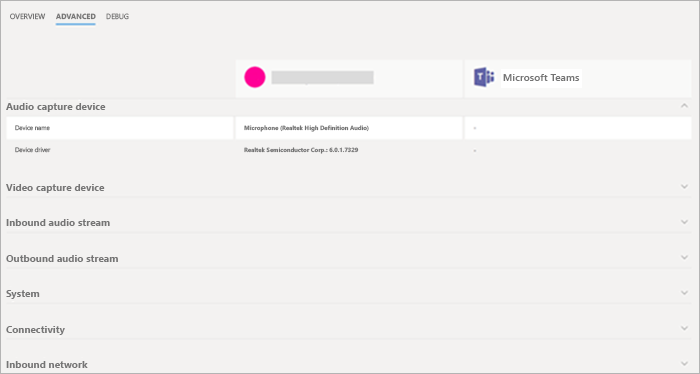
<style>
.page{position:relative;width:700px;height:374px;background:#f3f2f1}
.page>*{position:absolute;margin:0}
.t1{font:7.3px "SegoeUI";color:#757575}
.t2{font:7.3px "SegoeUI-Bold";color:#757575}
.t3{font:10.3px "SegoeUI-Semibold";color:#757575}
.t4{font:10px "SegoeUI-Bold";color:#757575}
.t5{font:6.1px "SegoeUI";color:#757575}
.t6{font:6px "SegoeUI-Bold";color:#737373}
</style>
<div class="page">
<p class="t1" style="left:10px;top:13px;width:36px;height:7px">OVERVIEW</p>
<p class="t2" style="left:56px;top:13px;width:40px;height:7px">ADVANCED</p>
<p class="t1" style="left:106px;top:13px;width:23px;height:7px">DEBUG</p>
<p class="t3" style="left:503px;top:74px;width:77px;height:7px">Microsoft Teams</p>
<p class="t4" style="left:6px;top:103px;width:100px;height:9px">Audio capture device</p>
<p class="t5" style="left:15px;top:125px;width:35px;height:6px">Device name</p>
<p class="t6" style="left:244px;top:125px;width:125px;height:7px">Microphone (Realtek High Definition Audio)</p>
<p class="t5" style="left:15px;top:147px;width:36px;height:6px">Device driver</p>
<p class="t6" style="left:244px;top:147px;width:115px;height:7px">Realtek Semiconductor Corp.: 6.0.1.7329</p>
<p class="t4" style="left:6px;top:184px;width:99px;height:9px">Video capture device</p>
<p class="t4" style="left:6px;top:219px;width:104px;height:7px">Inbound audio stream</p>
<p class="t4" style="left:6px;top:255px;width:112px;height:7px">Outbound audio stream</p>
<p class="t4" style="left:6px;top:290px;width:34px;height:9px">System</p>
<p class="t4" style="left:6px;top:326px;width:59px;height:9px">Connectivity</p>
<p class="t4" style="left:6px;top:361px;width:82px;height:7px">Inbound network</p>
</div>
